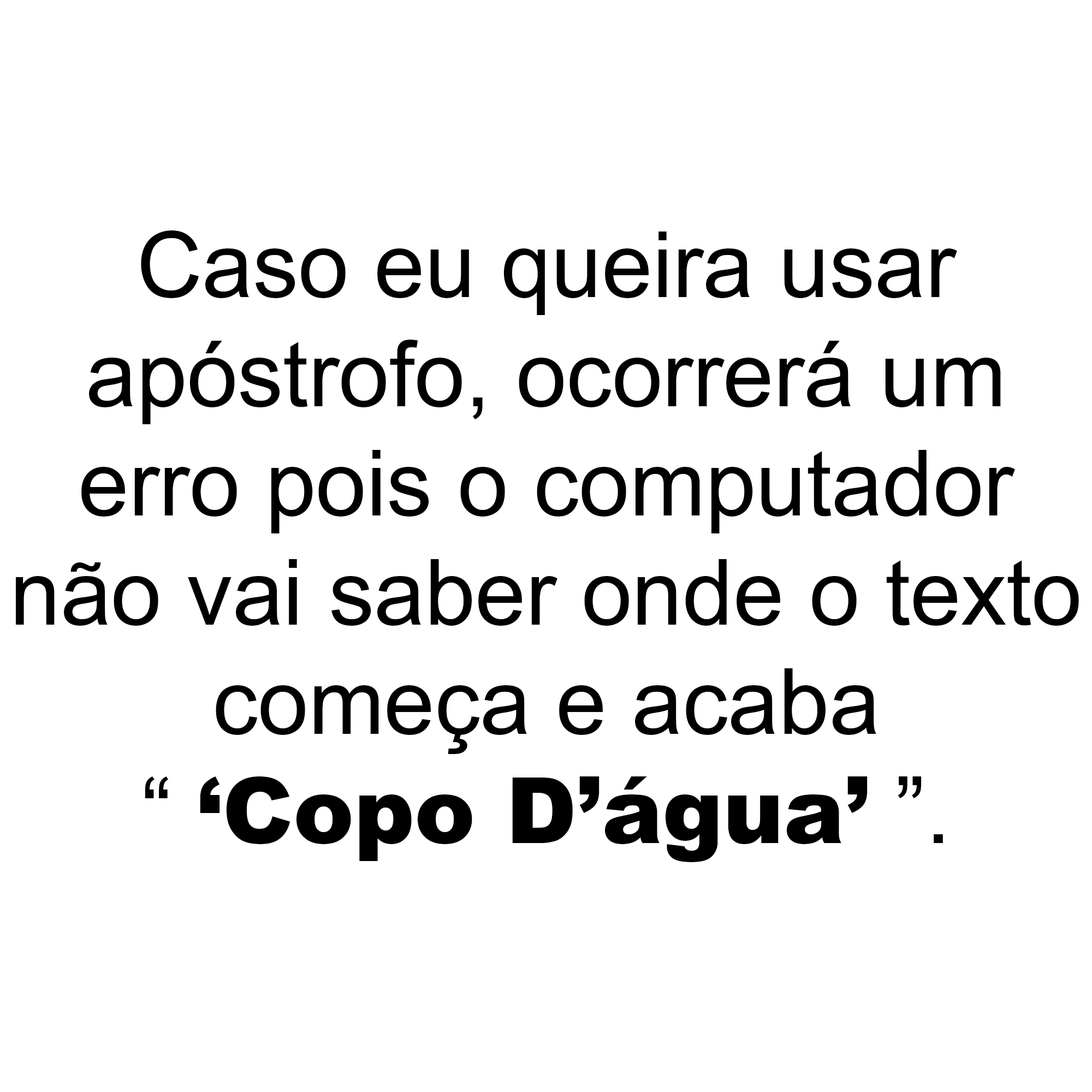
<style>
.page{position:relative;width:1092px;height:1092px;background:#ffffff}
.page>*{position:absolute;margin:0}
.t1{font:91px "ArialMT";color:#000000}
.t2{font:91px "Arial-Black";color:#000000}
</style>
<div class="page">
<p class="t1" style="left:16px;top:230px;width:1063px;height:632px;text-align:center">Caso eu queira usar<br>apóstrofo, ocorrerá um<br>erro pois o computador<br>não vai saber onde o texto<br>começa e acaba<br>“ <span class="t2">‘Copo D’água’</span> ”.</p>
</div>
